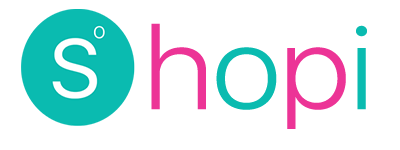
<style>
.page{position:relative;width:400px;height:150px;background:#ffffff}
.page>*{position:absolute;margin:0}
.t1{font:115.8px "SFUIDisplay-Light";color:#ec3496;scale:1.08 1}
.t2{font:115.8px "SFUIDisplay-Light";color:#0abbb0;scale:1.08 1}
</style>
<div class="page">
<p class="t1" style="left:151px;top:23px;width:216px;height:106px">h<span class="t2">o</span>p<span class="t2">i</span></p>
</div>
